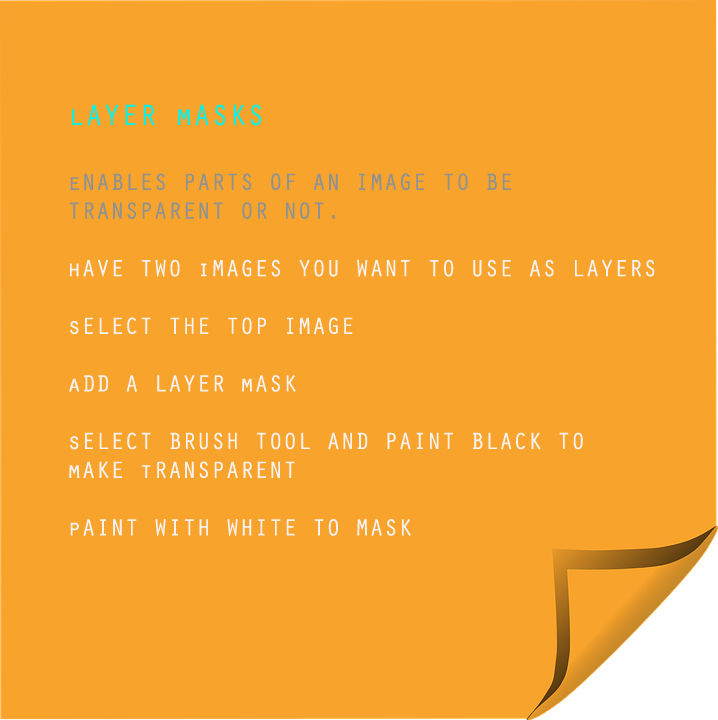
<style>
.page{position:relative;width:718px;height:720px;background:#f8a32b}
.page>*{position:absolute;margin:0}
.t1{font:24px "OratorStd";color:#f7f1f1}
.t2{font:30px "OratorStd";color:#12efe2}
.t3{font:24px "OratorStd";color:#8e9293}
</style>
<div class="page">
<p class="t1" style="left:69px;top:104px;width:586px;height:432px"><span class="t2">lAYER mASKS<br><br></span><span class="t3">eNABLES PARTS OF AN IMAGE TO BE<br>TRANSPARENT OR NOT.<br></span><br>hAVE TWO iMAGES YOU WANT TO USE AS LAYERS<br><br>sELECT THE TOP IMAGE<br><br>aDD A LAYER mASK<br><br>sELECT BRUSH TOOL AND PAINT BLACK TO <br>mAKE tRANSPARENT<br><br>pAINT WITH WHITE TO MASK</p>
</div>
